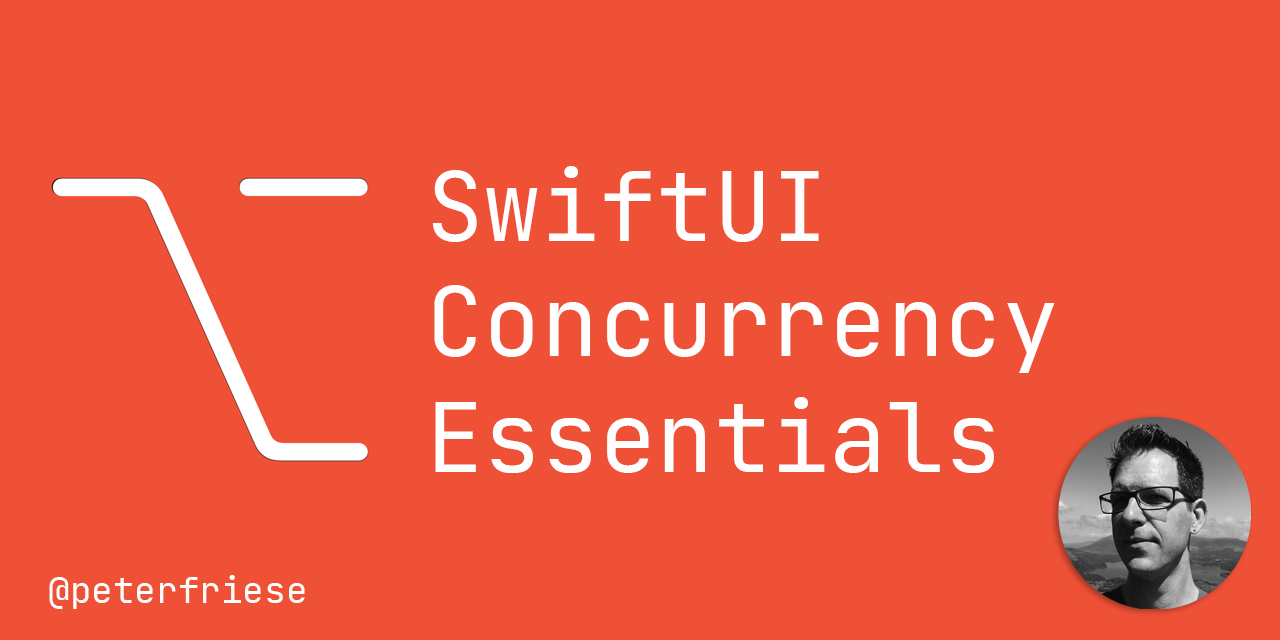
<style>
.page{position:relative;width:1280px;height:640px;background:#ef5137}
.page>*{position:absolute;margin:0}
.t1{font:96px "JetBrainsMono-Regular";color:#fefefe}
.t2{font:36px "JetBrainsMono-Regular";color:#fefefe}
</style>
<div class="page">
<p class="t1" style="left:432px;top:166px;width:623px;height:307px">SwiftUI<br>Concurrency<br>Essentials</p>
<p class="t2" style="left:49px;top:575px;width:256px;height:34px">@peterfriese</p>
</div>
